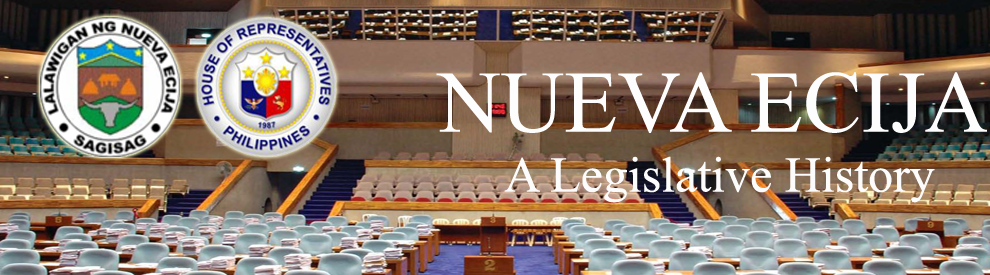
<style>
.page{position:relative;width:990px;height:275px}
.page>*{position:absolute;margin:0}
.t1{font:50px "TimesNewRomanPSMT";color:#fdfcfc}
.t2{font:87.5px "TimesNewRomanPSMT";color:#fdfdfd}
</style>
<div class="page">
<p class="t1" style="left:436px;top:72px;width:551px;height:131px;text-align:center"><span class="t2">NUEVA ECIJA<br></span>A Legislative History</p>
</div>
